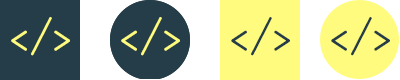
<style>
.page{position:relative;width:400px;height:80px;background:#253d49}
.page>*{position:absolute;margin:0}
.t1{font:48px "Dosis-Regular";color:#fffb7f}
.t2{font:48px "Dosis-Regular";color:#253d49}
</style>
<div class="page">
<p class="t1" style="left:11px;top:17px;width:59px;height:39px">&lt;/&gt;</p>
<p class="t1" style="left:121px;top:17px;width:59px;height:39px">&lt;/&gt;</p>
<p class="t2" style="left:231px;top:17px;width:59px;height:39px">&lt;/&gt;</p>
<p class="t2" style="left:331px;top:17px;width:59px;height:39px">&lt;/&gt;</p>
</div>
